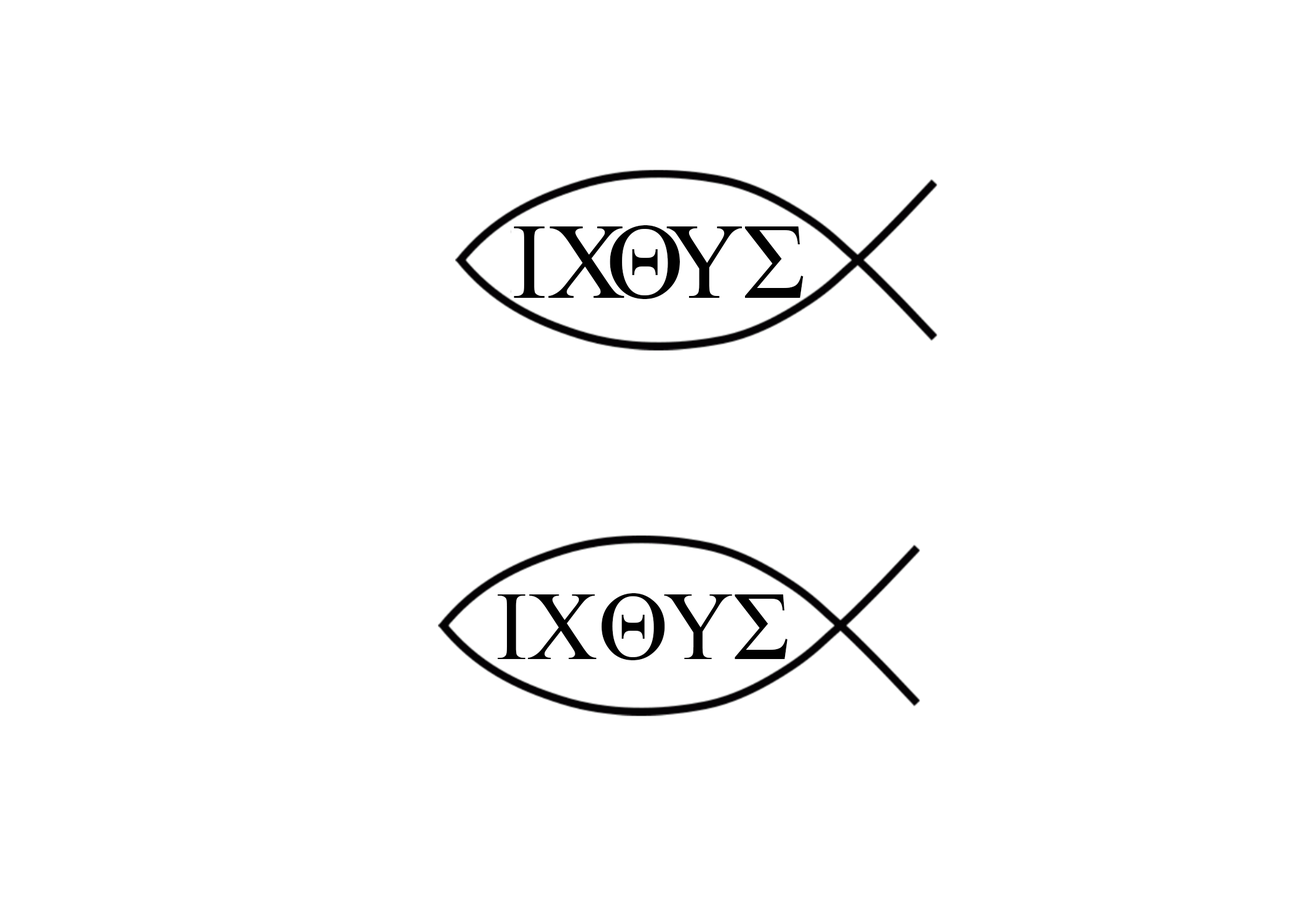
<style>
.page{position:relative;width:1292px;height:923px;background:#ffffff}
.page>*{position:absolute;margin:0}
.t1{font:107.7px "TimesNewRomanPSMT";color:#000000}
.t2{font:107.7px "TimesNewRomanPSMT";letter-spacing:-0.175em;color:#000000}
.t3{font:107.7px "TimesNewRomanPSMT";letter-spacing:-0.12em;color:#000000}
.t4{font:97.4px "TimesNewRomanPSMT";color:#000000}
</style>
<div class="page">
<p class="t1" style="left:514px;top:225px;width:290px;height:74px">Ι<span class="t2">Χ</span><span class="t3">Θ</span>ΥΣ</p>
<p class="t4" style="left:497px;top:593px;width:291px;height:67px">ΙΧΘΥΣ</p>
</div>
